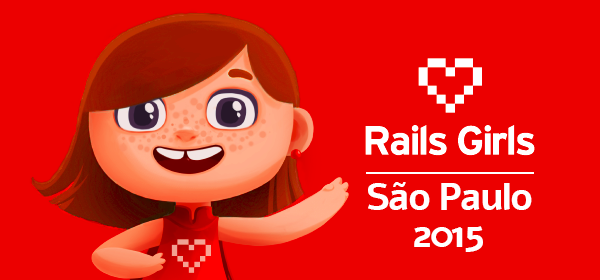
<style>
.page{position:relative;width:600px;height:280px;background:#ec0000}
.page>*{position:absolute;margin:0}
.t1{font:39px "Alef-Bold";letter-spacing:-0.05em;color:#ffffff}
.t2{font:39px "Alef-Bold";letter-spacing:-0.075em;color:#ffffff}
</style>
<div class="page">
<p class="t1" style="left:368px;top:182px;width:164px;height:28px">São Paulo</p>
<p class="t2" style="left:414px;top:226px;width:69px;height:26px">2015</p>
</div>
